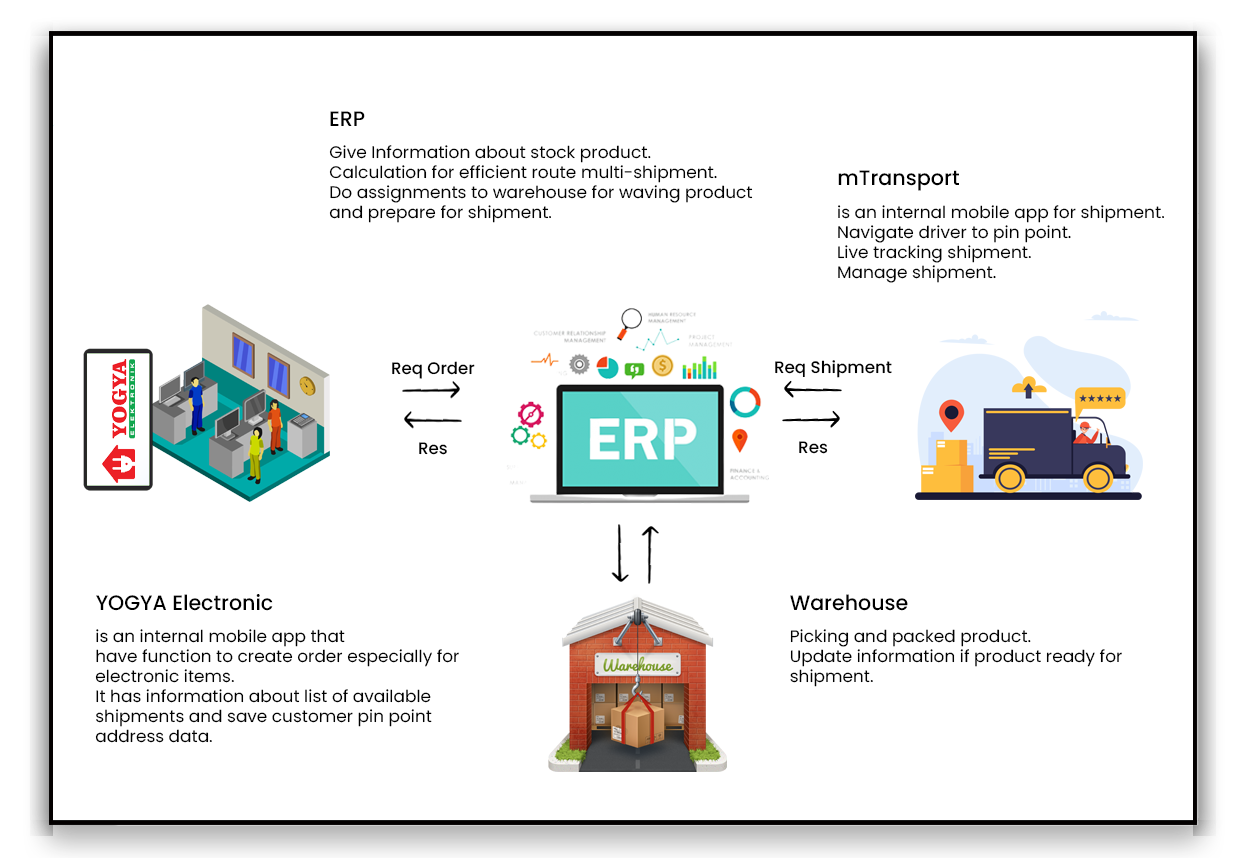
<style>
.page{position:relative;width:1248px;height:858px;background:#ffffff}
.page>*{position:absolute;margin:0}
.t1{font:20.9px "Poppins-Medium";color:#000000}
.t2{font:16.7px "Poppins-Regular";color:#000000}
.t3{font:20.8px "Poppins-Medium";color:#000000}
.t4{font:16.7px "Poppins-Medium";color:#000000}
</style>
<div class="page">
<p class="t1" style="left:330px;top:111px;width:35px;height:15px">ERP</p>
<p class="t2" style="left:329px;top:145px;width:424px;height:78px">Give Information about stock product.<br>Calculation for efficient route multi-shipment.<br>Do assignments to warehouse for waving product<br>and prepare for shipment.</p>
<p class="t3" style="left:838px;top:170px;width:121px;height:21px">mTransport</p>
<p class="t2" style="left:838px;top:205px;width:326px;height:78px">is an internal mobile app for shipment.<br>Navigate driver to pin point.<br>Live tracking shipment.<br>Manage shipment.</p>
<p class="t4" style="left:392px;top:361px;width:83px;height:18px">Req Order</p>
<p class="t4" style="left:775px;top:360px;width:117px;height:18px">Req Shipment</p>
<p class="t4" style="left:419px;top:442px;width:28px;height:13px">Res</p>
<p class="t4" style="left:799px;top:441px;width:29px;height:13px">Res</p>
<p class="t3" style="left:96px;top:594px;width:177px;height:17px">YOGYA Electronic</p>
<p class="t3" style="left:790px;top:594px;width:118px;height:17px">Warehouse</p>
<p class="t2" style="left:95px;top:629px;width:364px;height:114px">is an internal mobile app that<br>have function to create order especially for<br>electronic items.<br>It has information about list of available<br>shipments and save customer pin point <br>address data.</p>
<p class="t2" style="left:790px;top:629px;width:332px;height:58px">Picking and packed product.<br>Update information if product ready for <br>shipment.</p>
</div>
